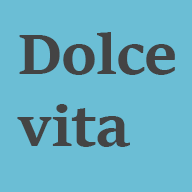
<style>
.page{position:relative;width:192px;height:192px;background:#6bbed5}
.page>*{position:absolute;margin:0}
.t1{font:61.3px/71.5px "SitkaText-Bold";letter-spacing:-0.02em;color:#444444}
</style>
<div class="page">
<p class="t1" style="left:17px;top:32px;width:158px;height:115px">Dolce<br>vita</p>
</div>
